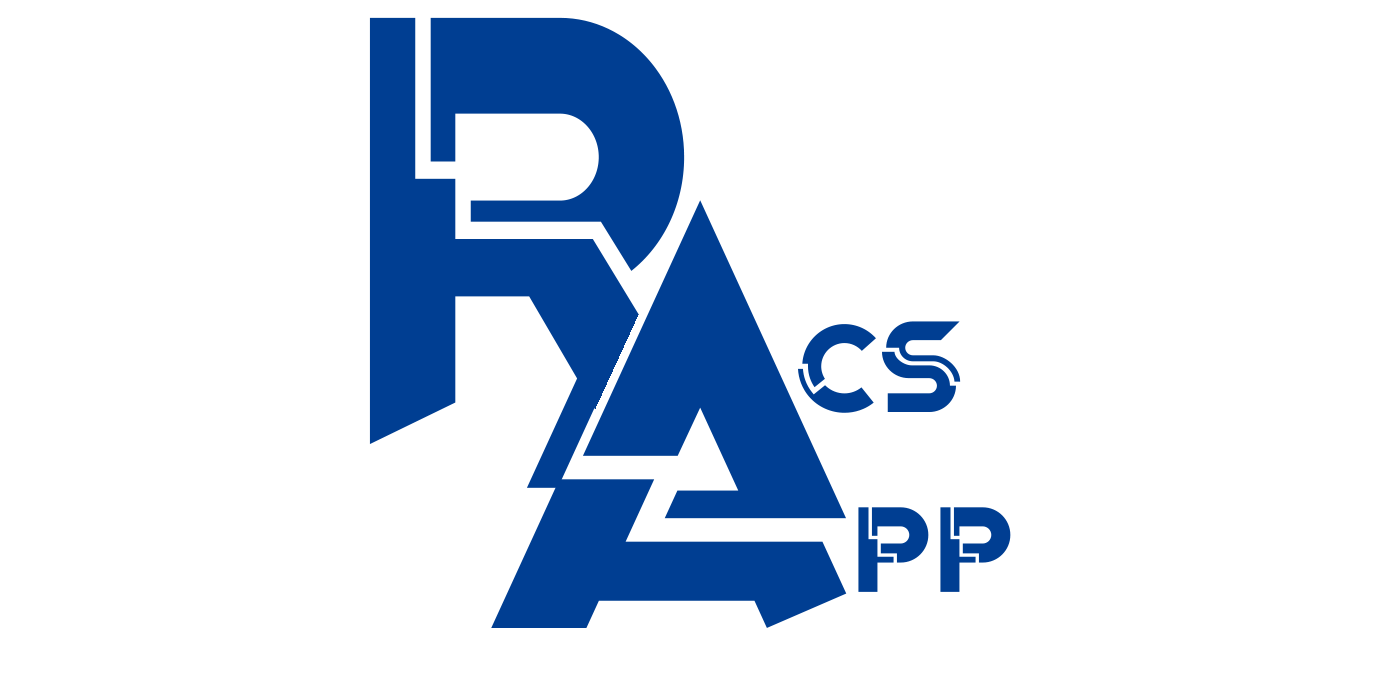
<style>
.page{position:relative;width:1400px;height:700px;background:#ffffff}
.page>*{position:absolute;margin:0}
.t1{font:574.3px "OriginTechDemoRegular";color:#003e92}
.t2{font:125.9px "OriginTechDemoRegular";color:#003e92}
</style>
<div class="page">
<p class="t1" style="left:491px;top:200px;width:356px;height:428px">A</p>
<p class="t2" style="left:798px;top:321px;width:163px;height:92px">CS</p>
<p class="t2" style="left:858px;top:507px;width:153px;height:85px">pp</p>
</div>
